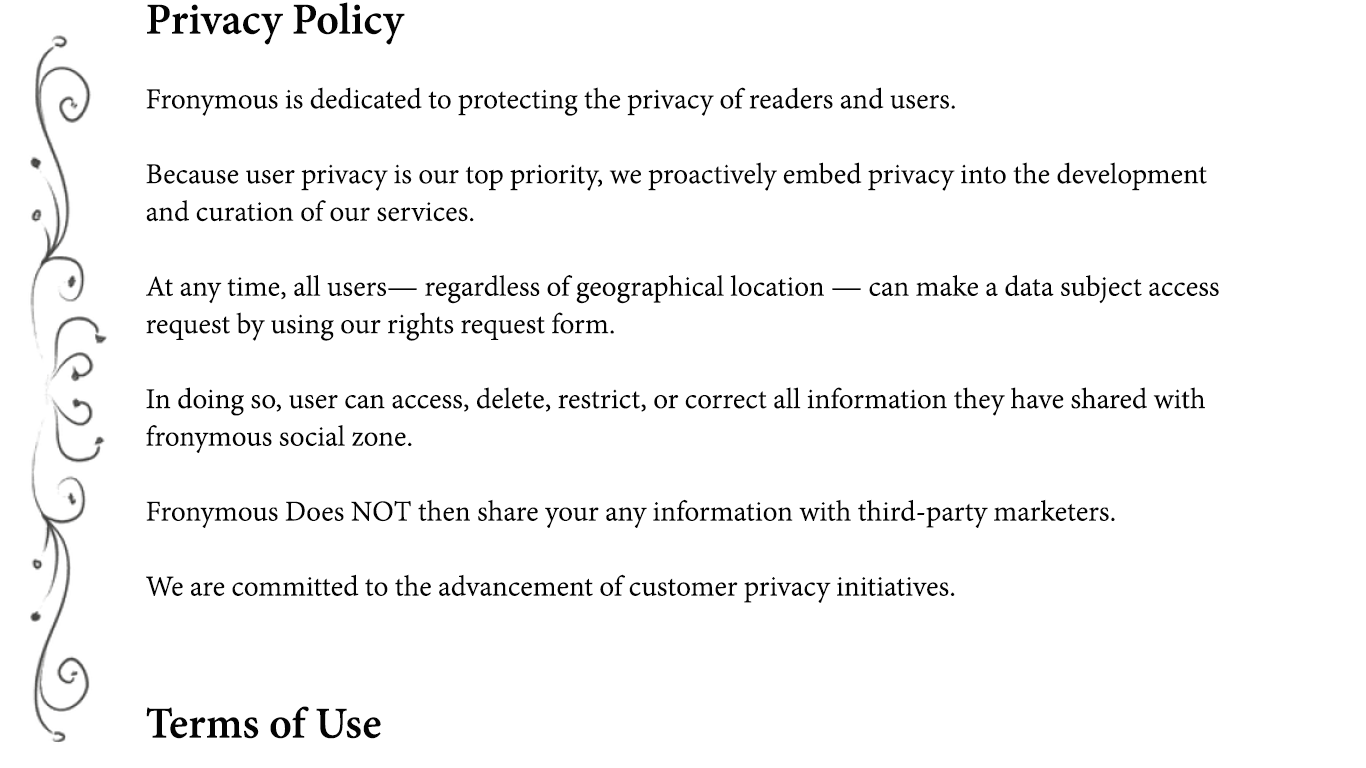
<style>
.page{position:relative;width:1366px;height:768px;background:#ffffff}
.page>*{position:absolute;margin:0}
.t1{font:48px "AdobeDevanagari-Bold";color:#040404}
.t2{font:31.2px "AdobeDevanagari-Regular";color:#040404}
</style>
<div class="page">
<p class="t1" style="left:147px;top:2px;width:258px;height:43px">Privacy Policy</p>
<p class="t2" style="left:146px;top:87px;width:1073px;height:516px">Fronymous is dedicated to protecting the privacy of readers and users. <br><br>Because user privacy is our top priority, we proactively embed privacy into the development and curation of our services.<br><br>At any time, all users— regardless of geographical location — can make a data subject access request by using our rights request form. <br><br>In doing so, user can access, delete, restrict, or correct all information they have shared with fronymous social zone.<br><br>Fronymous Does NOT then share your any information with third-party marketers.<br><br>We are committed to the advancement of customer privacy initiatives.</p>
<p class="t1" style="left:146px;top:706px;width:235px;height:33px">Terms of Use</p>
</div>
